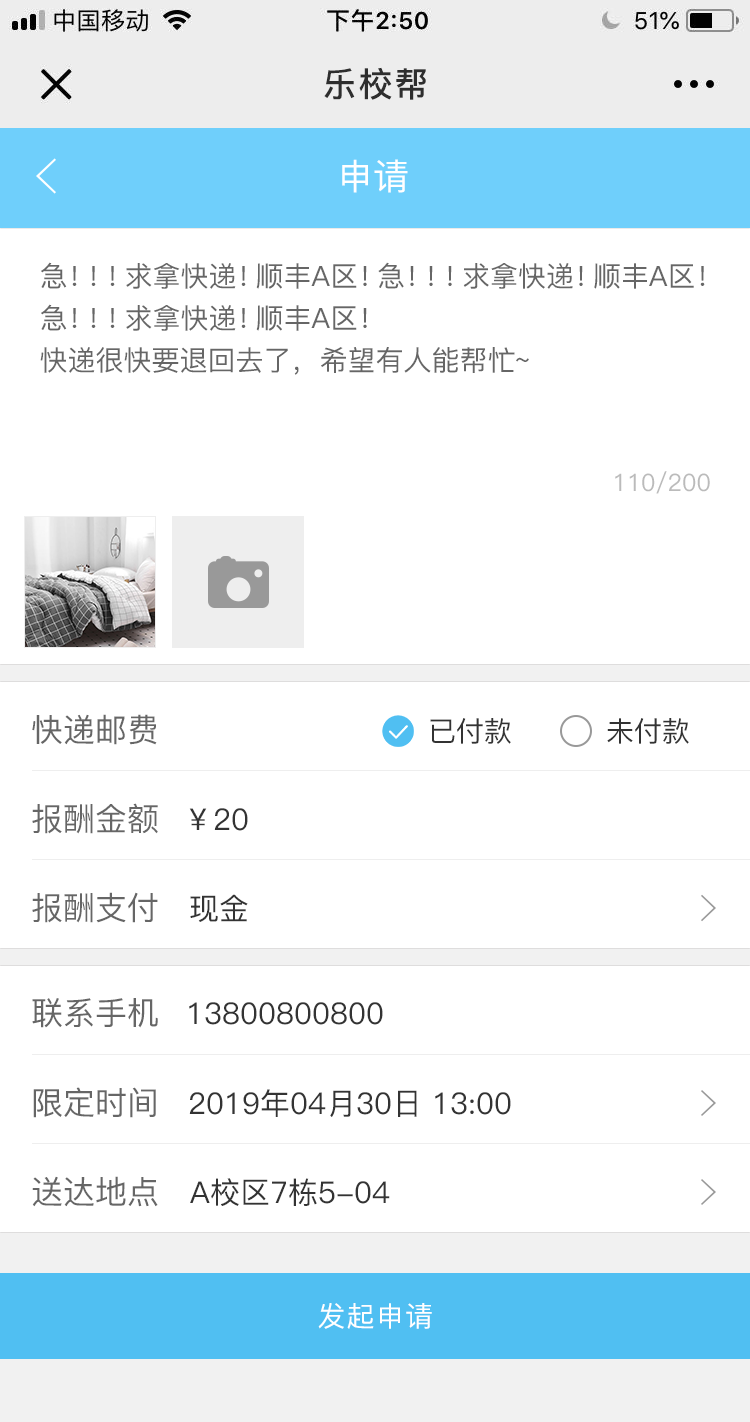
<style>
.page{position:relative;width:750px;height:1422px;background:#ffffff}
.page>*{position:absolute;margin:0}
.t1{font:36px "PingFang-SC-Medium";color:#ffffff}
.t2{font:28px/42px "PingFang-SC-Medium";color:#666666}
.t3{font:28px/42px "PingFang-SC-Medium";letter-spacing:-0.32em;color:#666666}
.t4{font:24px "PingFang-SC-Medium";color:#bbbbbb}
.t5{font:32px "PingFang-SC-Medium";color:#666666}
.t6{font:28px "PingFang-SC-Medium";color:#333333}
.t7{font:30px "PingFang-SC-Medium";color:#333333}
.t8{font:28px "PingFang-SC-Medium";letter-spacing:0.04em;color:#ffffff}
</style>
<div class="page">
<p class="t1" style="left:342px;top:159px;width:66px;height:34px">申请</p>
<p class="t2" style="left:40px;top:262px;width:665px;height:113px">急<span class="t3">！！！</span>求拿快递<span class="t3">！</span>顺丰A区<span class="t3">！</span>急<span class="t3">！！！</span>求拿快递<span class="t3">！</span>顺丰A区<span class="t3">！<br></span>急<span class="t3">！！！</span>求拿快递<span class="t3">！</span>顺丰A区<span class="t3">！<br></span>快递很快要退回去了，希望有人能帮忙~</p>
<p class="t4" style="left:615px;top:471px;width:95px;height:23px">110/200</p>
<p class="t5" style="left:32px;top:714px;width:125px;height:31px">快递邮费</p>
<p class="t6" style="left:430px;top:718px;width:81px;height:26px">已付款</p>
<p class="t6" style="left:607px;top:718px;width:82px;height:26px">未付款</p>
<p class="t5" style="left:32px;top:803px;width:126px;height:31px">报酬金额</p>
<p class="t7" style="left:189px;top:808px;width:59px;height:23px">￥20</p>
<p class="t5" style="left:32px;top:892px;width:126px;height:31px">报酬支付</p>
<p class="t7" style="left:190px;top:894px;width:58px;height:28px">现金</p>
<p class="t5" style="left:32px;top:998px;width:126px;height:30px">联系手机</p>
<p class="t7" style="left:189px;top:1002px;width:194px;height:23px">13800800800</p>
<p class="t5" style="left:33px;top:1087px;width:123px;height:31px">限定时间</p>
<p class="t7" style="left:189px;top:1089px;width:322px;height:28px">2019年04月30日 13:00</p>
<p class="t5" style="left:32px;top:1176px;width:126px;height:31px">送达地点</p>
<p class="t7" style="left:190px;top:1178px;width:200px;height:28px">A校区7栋5-04</p>
<p class="t8" style="left:318px;top:1303px;width:114px;height:26px">发起申请</p>
</div>
